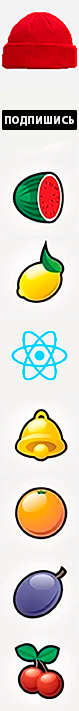
<style>
.page{position:relative;width:79px;height:711px}
.page>*{position:absolute;margin:0}
.t1{font:10.7px "MyriadPro-Bold";letter-spacing:0.05em;color:#f6f3f3}
</style>
<div class="page">
<p class="t1" style="left:5px;top:116px;width:69px;height:10px">ПОДПИШИСЬ</p>
</div>
